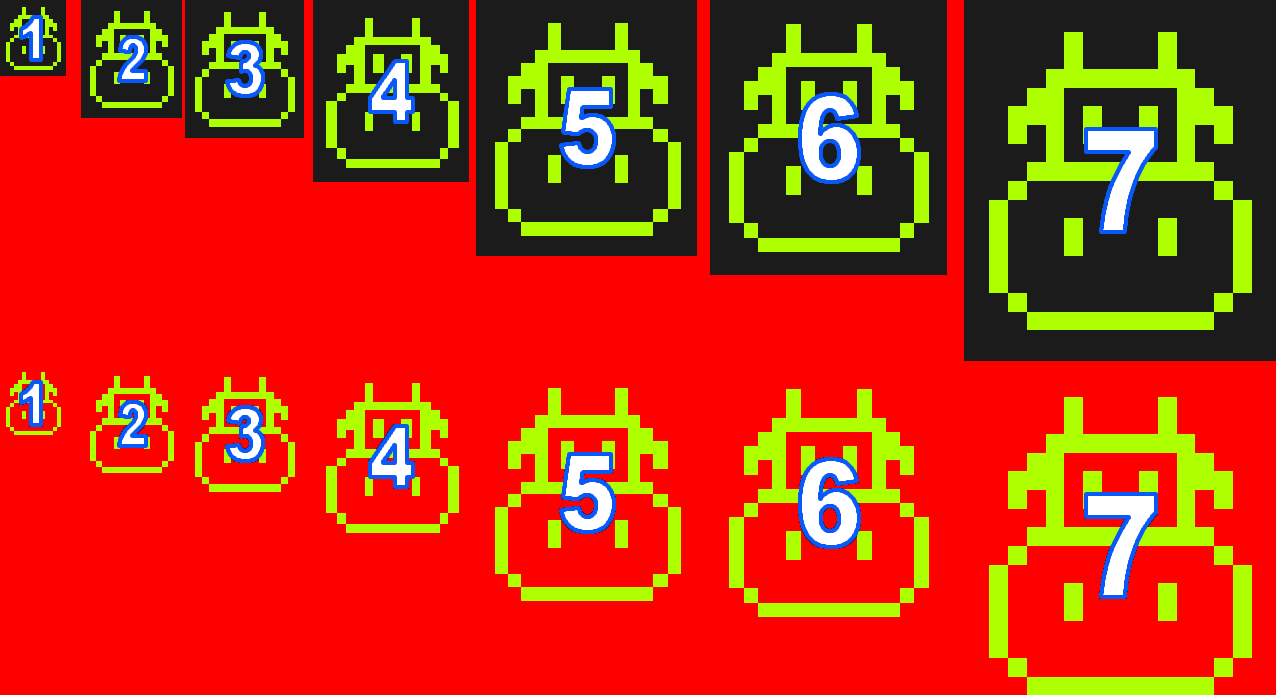
<style>
.page{position:relative;width:1276px;height:695px;background:#ff0000}
.page>*{position:absolute;margin:0}
.t1{font:57.6px "Arial-Black";scale:0.83 1}
.t2{font:60px "Arial-Black";scale:0.83 1}
.t3{font:72px "Arial-Black";scale:0.83 1}
.t4{font:84px "Arial-Black";color:#ffffff;scale:0.83 1}
.t5{font:108px "Arial-Black";color:#ffffff;scale:0.83 1}
.t6{font:120px "Arial-Black";color:#ffffff;scale:0.83 1}
.t7{font:144px "Arial-Black";color:#ffffff;scale:0.83 1}
</style>
<div class="page">
<p class="t1" style="left:21px;top:17px;width:20px;height:43px">1</p>
<p class="t2" style="left:119px;top:37px;width:27px;height:44px">2</p>
<p class="t3" style="left:227px;top:42px;width:36px;height:54px">3</p>
<p class="t4" style="left:370px;top:61px;width:43px;height:61px">4</p>
<p class="t5" style="left:561px;top:89px;width:53px;height:78px">5</p>
<p class="t6" style="left:800px;top:94px;width:59px;height:88px">6</p>
<p class="t7" style="left:1086px;top:129px;width:70px;height:103px">7</p>
<p class="t1" style="left:21px;top:382px;width:20px;height:43px">1</p>
<p class="t2" style="left:119px;top:402px;width:27px;height:44px">2</p>
<p class="t3" style="left:227px;top:407px;width:36px;height:54px">3</p>
<p class="t4" style="left:370px;top:426px;width:43px;height:61px">4</p>
<p class="t5" style="left:561px;top:454px;width:53px;height:78px">5</p>
<p class="t6" style="left:800px;top:459px;width:59px;height:88px">6</p>
<p class="t7" style="left:1086px;top:494px;width:70px;height:103px">7</p>
</div>
